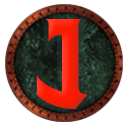
<style>
.page{position:relative;width:130px;height:126px;background:#ffffff}
.page>*{position:absolute;margin:0}
.t1{font:108.8px "LifeCraft";color:#ff1a02}
</style>
<div class="page">
<p class="t1" style="left:36px;top:19px;width:52px;height:90px">J</p>
</div>
